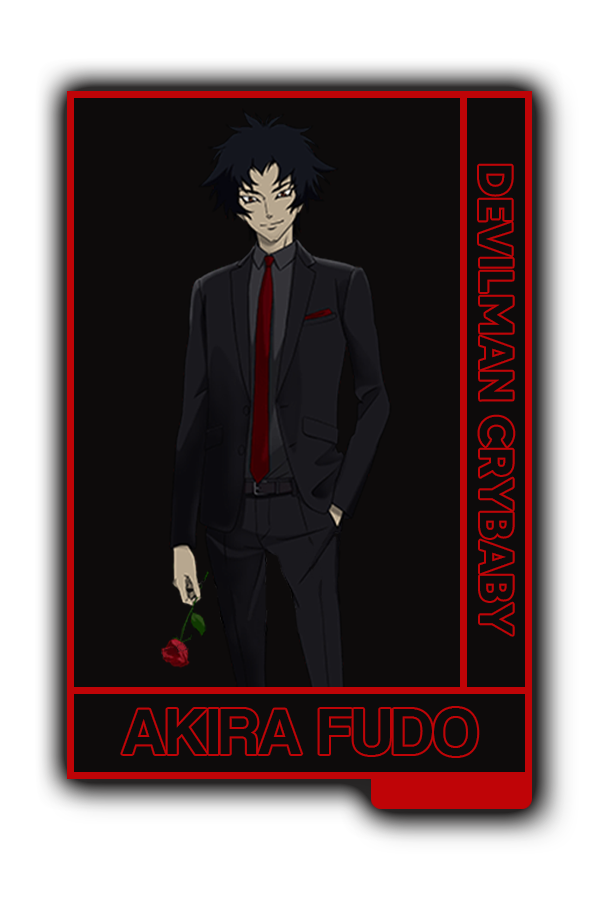
<style>
.page{position:relative;width:600px;height:900px;background:#0d0b0b}
.page>*{position:absolute;margin:0}
.t1{font:46.8px "MADETOMMY-Bold";color:#0d0b0b}
.t2{font:67.7px "CoolveticaRg-Regular";color:#0d0b0b}
</style>
<div class="page">
<p class="t1" style="left:479px;top:165px;width:35px;height:470px;rotate:90deg">DEVILMAN CRYBABY</p>
<p class="t2" style="left:122px;top:708px;width:356px;height:48px">AKIRA FUDO</p>
</div>
